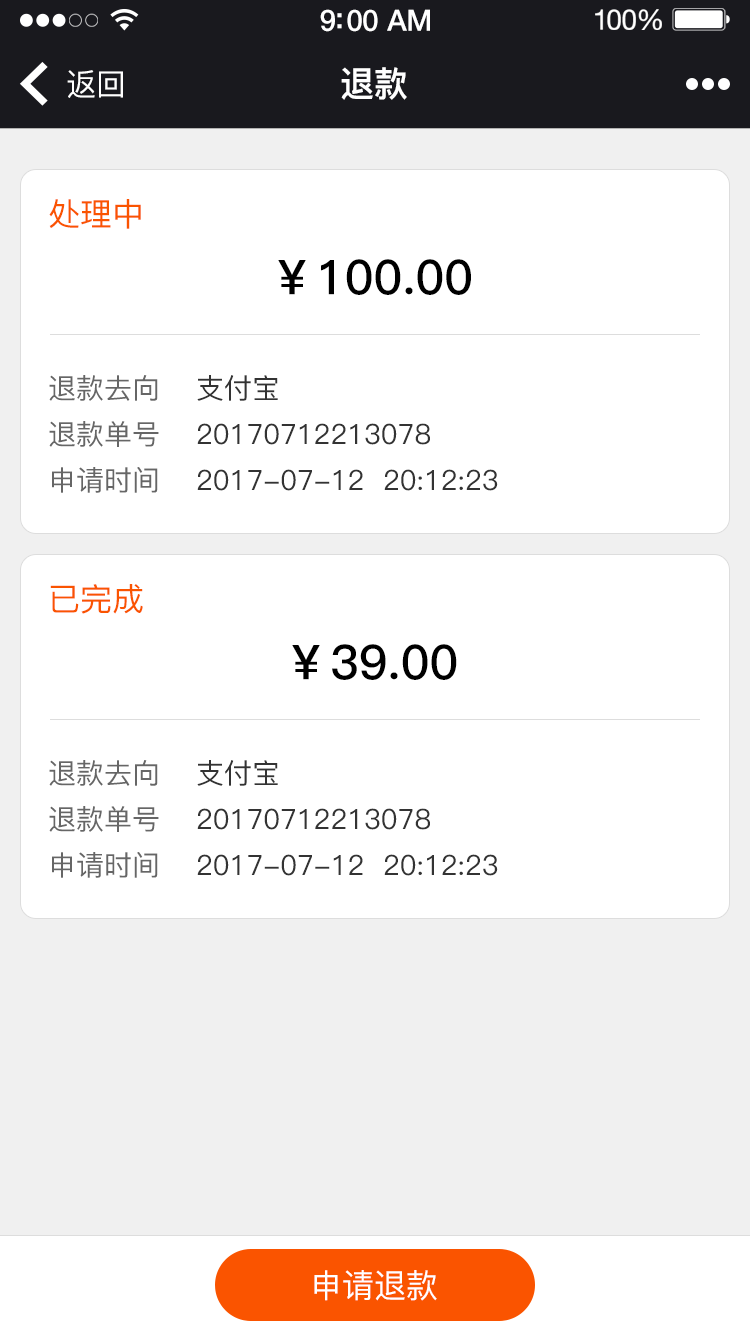
<style>
.page{position:relative;width:750px;height:1334px;background:#ffffff}
.page>*{position:absolute;margin:0}
.t1{font:29.5px "HelveticaNeue-Medium";letter-spacing:-0.02em;color:#ffffff}
.t2{font:28.3px "HelveticaNeue";letter-spacing:-0.02em;color:#ffffff}
.t3{font:30.9px "PingFang-SC-Medium";color:#ffffff;scale:0.97 1}
.t4{font:35px "PingFang-SC-Heavy";color:#ffffff;scale:0.97 1}
.t5{font:32px "PingFang-SC-Medium";color:#fa5400}
.t6{font:48px "PingFang-SC-Bold";color:#000000}
.t7{font:28px "PingFang-SC-Medium";color:#666666}
.t8{font:28px "PingFang-SC-Medium";color:#333333}
.t9{font:33px "PingFang-SC-Medium";color:#ffffff}
</style>
<div class="page">
<p class="t1" style="left:320px;top:9px;width:110px;height:23px">9:00 AM</p>
<p class="t2" style="left:595px;top:9px;width:67px;height:21px">100%</p>
<p class="t3" style="left:67px;top:70px;width:56px;height:28px">返回</p>
<p class="t4" style="left:341px;top:67px;width:66px;height:33px">退款</p>
<p class="t5" style="left:49px;top:199px;width:92px;height:30px">处理中</p>
<p class="t6" style="left:278px;top:259px;width:193px;height:36px">￥100.00</p>
<p class="t7" style="left:49px;top:375px;width:109px;height:26px">退款去向</p>
<p class="t8" style="left:197px;top:375px;width:81px;height:26px">支付宝</p>
<p class="t7" style="left:49px;top:421px;width:110px;height:26px">退款单号</p>
<p class="t8" style="left:197px;top:423px;width:233px;height:22px">20170712213078</p>
<p class="t7" style="left:52px;top:467px;width:106px;height:26px">申请时间</p>
<p class="t8" style="left:197px;top:469px;width:301px;height:22px">2017-07-12  20:12:23</p>
<p class="t5" style="left:50px;top:584px;width:93px;height:30px">已完成</p>
<p class="t6" style="left:292px;top:644px;width:165px;height:36px">￥39.00</p>
<p class="t7" style="left:49px;top:760px;width:109px;height:26px">退款去向</p>
<p class="t8" style="left:197px;top:760px;width:81px;height:26px">支付宝</p>
<p class="t7" style="left:49px;top:806px;width:110px;height:26px">退款单号</p>
<p class="t8" style="left:197px;top:808px;width:233px;height:22px">20170712213078</p>
<p class="t7" style="left:52px;top:852px;width:106px;height:26px">申请时间</p>
<p class="t8" style="left:197px;top:854px;width:301px;height:22px">2017-07-12  20:12:23</p>
<p class="t9" style="left:314px;top:1270px;width:123px;height:31px">申请退款</p>
</div>
